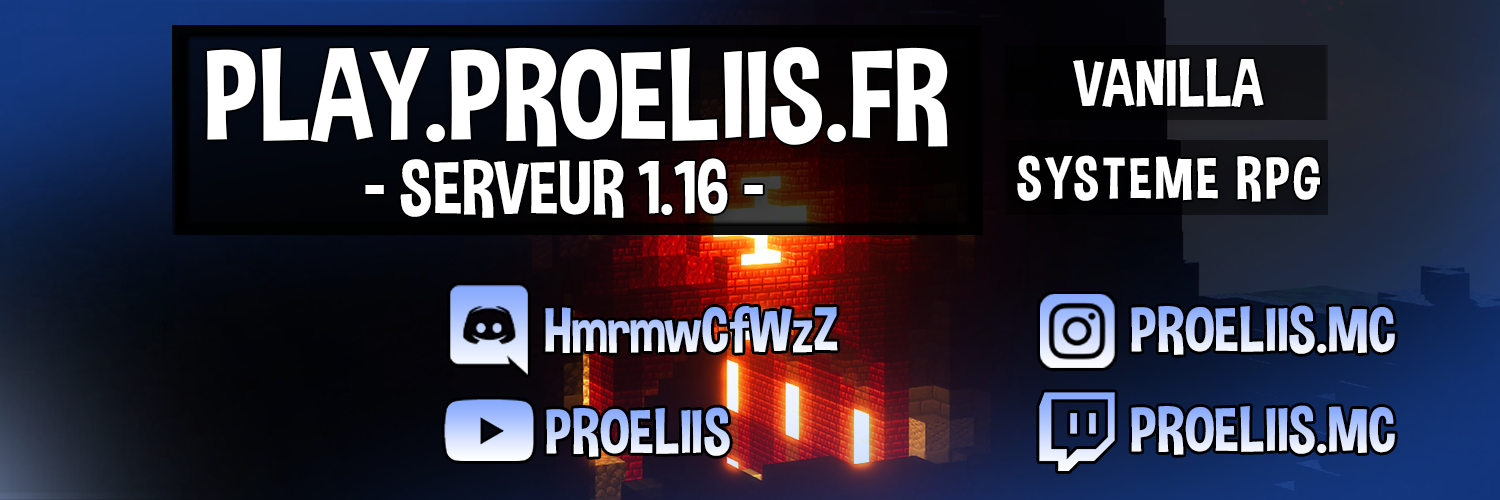
<style>
.page{position:relative;width:1500px;height:500px}
.page>*{position:absolute;margin:0}
.t1{font:128.1px "DimboRegular";color:#ffffff}
.t2{font:66.4px "DimboRegular";color:#ffffff}
.t3{font:75.4px "DimboRegular";color:#ffffff}
.t4{font:59.3px "DimboRegular";letter-spacing:0.05em;color:#ffffff}
.t5{font:63.2px "DimboRegular"}
</style>
<div class="page">
<p class="t1" style="left:207px;top:47px;width:741px;height:100px">PLAY.PROELIIS.FR</p>
<p class="t2" style="left:1073px;top:58px;width:191px;height:49px">VANILLA</p>
<p class="t3" style="left:365px;top:158px;width:398px;height:60px">- SERVEUR 1.16 -</p>
<p class="t4" style="left:1017px;top:155px;width:303px;height:47px">SYSTEME RPG</p>
<p class="t5" style="left:1131px;top:305px;width:264px;height:50px">PROELIIS.MC</p>
<p class="t5" style="left:545px;top:306px;width:293px;height:47px">HmrmwCfWzZ</p>
<p class="t5" style="left:546px;top:407px;width:184px;height:50px">PROELIIS</p>
<p class="t5" style="left:1131px;top:405px;width:264px;height:50px">PROELIIS.MC</p>
</div>
